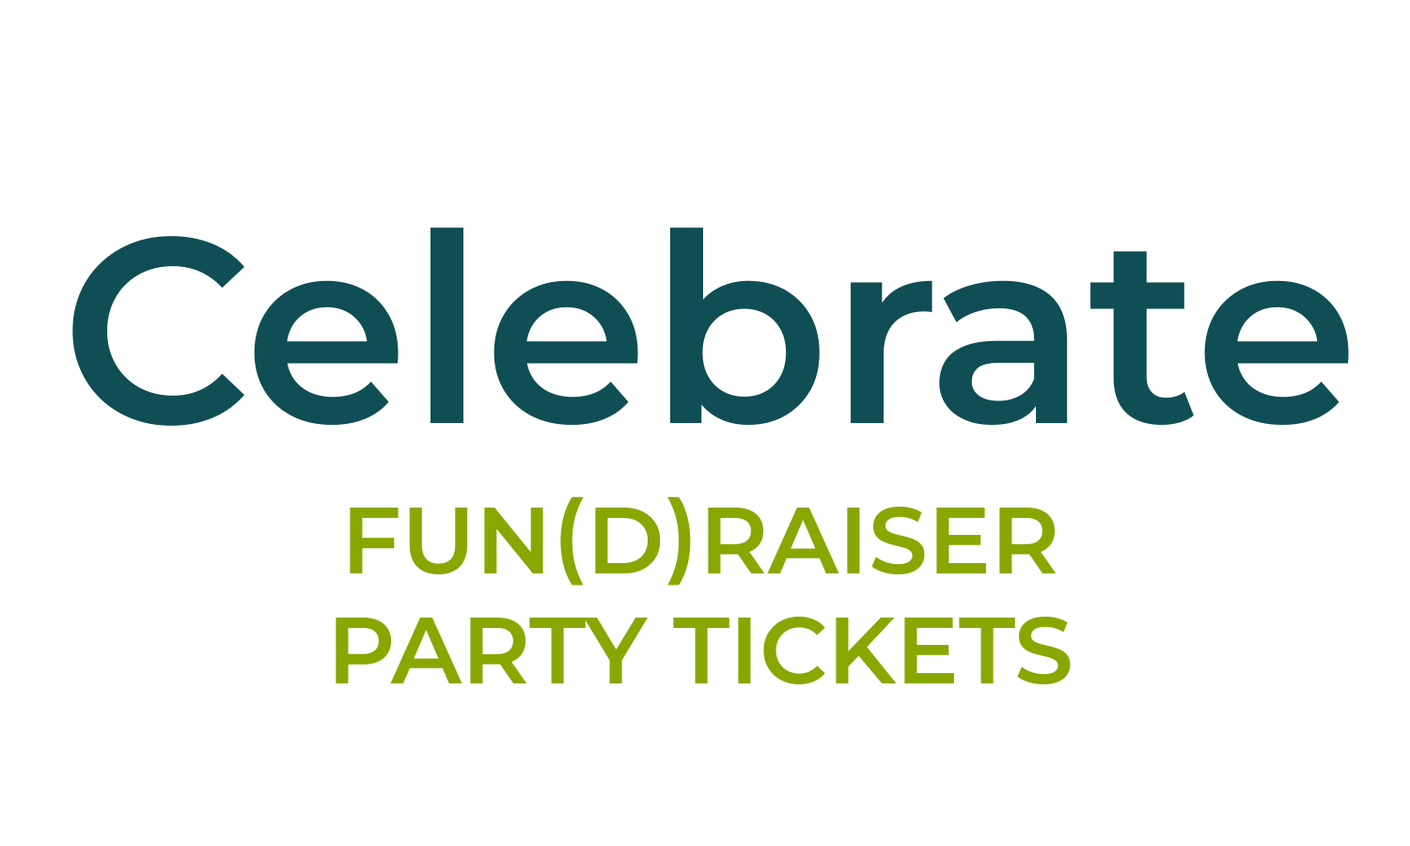
<style>
.page{position:relative;width:1410px;height:846px;background:#ffffff}
.page>*{position:absolute;margin:0}
.t1{font:263.1px "Montserrat-SemiBold";color:#0f4e54}
.t2{font:94px/0.2px "Montserrat-SemiBold";color:#88a700;text-transform:uppercase}
</style>
<div class="page">
<p class="t1" style="left:72px;top:227px;width:1277px;height:199px">Celebrate</p>
<p class="t2" style="left:336px;top:496px;width:734px;height:188px;text-align:center">Fun(d)raiser<br>party tickets</p>
</div>
